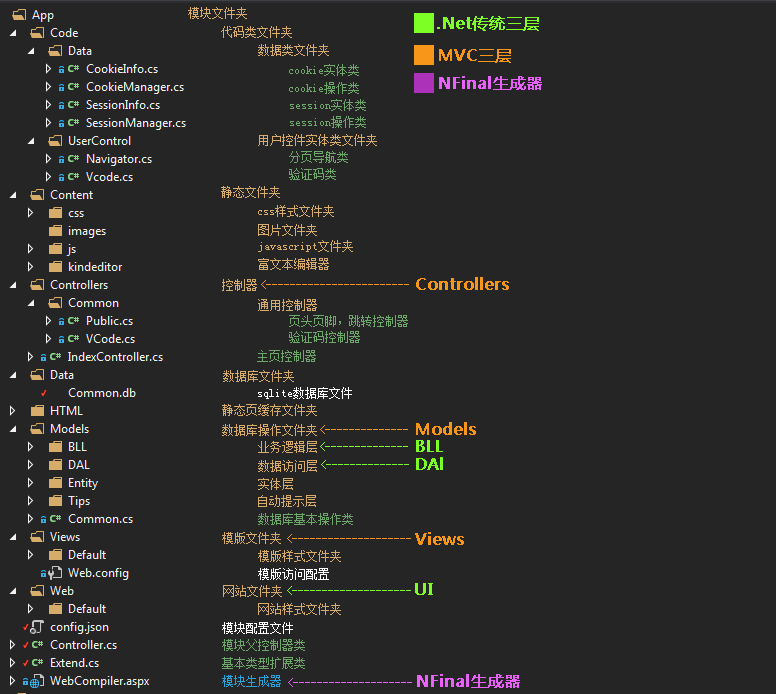
<style>
.page{position:relative;width:776px;height:694px;background:#252526}
.page>*{position:absolute;margin:0}
.t1{font:12px "SimSun";color:#d8ac6a}
.t2{font:16px "MicrosoftYaHei";color:#7dff26;font-weight:bold}
.t3{font:16px "MicrosoftYaHei";color:#f79619;font-weight:bold}
.t4{font:12px "SimSun";color:#6da86a}
.t5{font:12px "MicrosoftYaHei";color:#ea60fa;font-weight:bold}
.t6{font:12px "SimSun";color:#d7ab69}
.t7{font:12px "SimSun";color:#f79619}
.t8{font:12px "SimSun";color:#ffffff}
.t9{font:12px "MicrosoftYaHei";color:#f79619;font-weight:bold}
.t10{font:12px "SimSun";color:#7dff26}
.t11{font:12px "SimSun";color:#26a3db}
.t12{font:12px "SimSun";color:#ea60fa}
.t13{font:16px "MicrosoftYaHei";color:#ea60fa;font-weight:bold}
</style>
<div class="page">
<p class="t1" style="left:188px;top:7px;width:59px;height:12px">模块文件夹</p>
<p class="t2" style="left:437px;top:16px;width:102px;height:15px">.Net传统三层</p>
<p class="t1" style="left:221px;top:26px;width:71px;height:12px">代码类文件夹</p>
<p class="t1" style="left:258px;top:44px;width:71px;height:12px">数据类文件夹</p>
<p class="t3" style="left:439px;top:49px;width:72px;height:14px">MVC三层</p>
<p class="t4" style="left:289px;top:64px;width:70px;height:12px">cookie实体类</p>
<p class="t5" style="left:439px;top:76px;width:103px;height:14px">NFinal生成器</p>
<p class="t4" style="left:289px;top:82px;width:70px;height:12px">cookie操作类</p>
<p class="t4" style="left:290px;top:99px;width:76px;height:12px">session实体类</p>
<p class="t4" style="left:290px;top:116px;width:76px;height:12px">session操作类</p>
<p class="t1" style="left:258px;top:134px;width:119px;height:12px">用户控件实体类文件夹</p>
<p class="t4" style="left:289px;top:151px;width:59px;height:12px">分页导航类</p>
<p class="t4" style="left:289px;top:168px;width:47px;height:12px">验证码类</p>
<p class="t1" style="left:221px;top:186px;width:59px;height:12px">静态文件夹</p>
<p class="t1" style="left:258px;top:205px;width:76px;height:12px">css样式文件夹</p>
<p class="t1" style="left:258px;top:224px;width:59px;height:12px">图片文件夹</p>
<p class="t6" style="left:258px;top:240px;width:95px;height:12px">javascript文件夹</p>
<p class="t1" style="left:258px;top:258px;width:71px;height:12px">富文本编辑器</p>
<p class="t1" style="left:222px;top:279px;width:35px;height:12px">控制器</p>
<p class="t7" style="left:261px;top:280px;width:148px;height:9px">&lt;------------------------</p>
<p class="t3" style="left:416px;top:277px;width:93px;height:13px">Controllers</p>
<p class="t1" style="left:258px;top:299px;width:59px;height:12px">通用控制器</p>
<p class="t4" style="left:289px;top:315px;width:119px;height:12px">页头页脚，跳转控制器</p>
<p class="t4" style="left:289px;top:331px;width:71px;height:12px">验证码控制器</p>
<p class="t4" style="left:257px;top:350px;width:59px;height:12px">主页控制器</p>
<p class="t6" style="left:223px;top:370px;width:71px;height:12px">数据库文件夹</p>
<p class="t8" style="left:258px;top:387px;width:94px;height:12px">sqlite数据库文件</p>
<p class="t6" style="left:222px;top:404px;width:95px;height:12px">静态页缓存文件夹</p>
<p class="t6" style="left:222px;top:424px;width:95px;height:12px">数据库操作文件夹</p>
<p class="t7" style="left:320px;top:425px;width:88px;height:9px">&lt;--------------</p>
<p class="t9" style="left:416px;top:422px;width:60px;height:13px">Models</p>
<p class="t6" style="left:258px;top:441px;width:59px;height:12px">业务逻辑层</p>
<p class="t10" style="left:320px;top:442px;width:88px;height:9px">&lt;--------------</p>
<p class="t2" style="left:416px;top:440px;width:27px;height:12px">BLL</p>
<p class="t6" style="left:258px;top:460px;width:59px;height:12px">数据访问层</p>
<p class="t10" style="left:321px;top:460px;width:88px;height:9px">&lt;--------------</p>
<p class="t2" style="left:416px;top:457px;width:27px;height:13px">DAl</p>
<p class="t6" style="left:258px;top:478px;width:35px;height:12px">实体层</p>
<p class="t6" style="left:258px;top:495px;width:58px;height:12px">自动提示层</p>
<p class="t4" style="left:258px;top:513px;width:95px;height:12px">数据库基本操作类</p>
<p class="t6" style="left:222px;top:532px;width:59px;height:12px">模版文件夹</p>
<p class="t7" style="left:287px;top:534px;width:124px;height:9px">&lt;--------------------</p>
<p class="t9" style="left:415px;top:532px;width:49px;height:13px">Views</p>
<p class="t6" style="left:258px;top:550px;width:83px;height:12px">模版样式文件夹</p>
<p class="t8" style="left:258px;top:568px;width:71px;height:12px">模版访问配置</p>
<p class="t6" style="left:223px;top:585px;width:59px;height:12px">网站文件夹</p>
<p class="t10" style="left:287px;top:586px;width:124px;height:9px">&lt;--------------------</p>
<p class="t2" style="left:415px;top:583px;width:18px;height:12px">UI</p>
<p class="t6" style="left:258px;top:603px;width:83px;height:12px">网站样式文件夹</p>
<p class="t8" style="left:222px;top:622px;width:71px;height:12px">模块配置文件</p>
<p class="t4" style="left:222px;top:639px;width:83px;height:12px">模块父控制器类</p>
<p class="t4" style="left:222px;top:657px;width:83px;height:12px">基本类型扩展类</p>
<p class="t11" style="left:222px;top:675px;width:59px;height:12px">模块生成器</p>
<p class="t12" style="left:288px;top:678px;width:124px;height:9px">&lt;--------------------</p>
<p class="t13" style="left:417px;top:674px;width:103px;height:14px">NFinal生成器</p>
</div>
